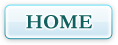
<style>
.page{position:relative;width:118px;height:45px}
.page>*{position:absolute;margin:0}
.t1{font:20.5px "Garamond-Bold";color:#116161;text-transform:uppercase}
</style>
<div class="page">
<p class="t1" style="left:26px;top:15px;width:66px;height:14px">HOME</p>
</div>
